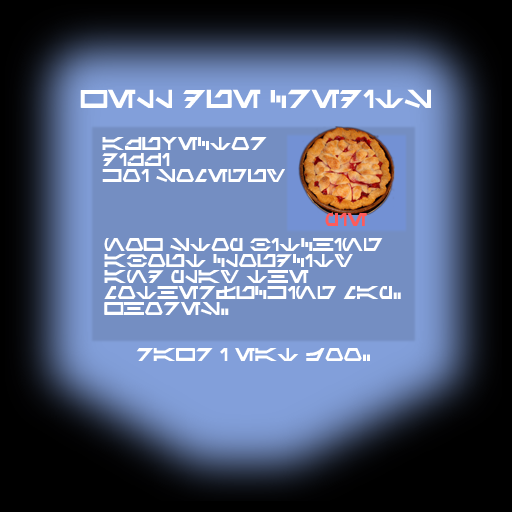
<style>
.page{position:relative;width:512px;height:512px}
.page>*{position:absolute;margin:0}
.t1{font:18.7px "Aurek-Besh";color:#ffffff}
.t2{font:13.3px "Aurek-Besh";color:#ffffff}
.t3{font:13.3px "Aurek-Besh";color:#ff5b5b}
</style>
<div class="page">
<p class="t1" style="left:80px;top:89px;width:351px;height:19px">WELL DUE CREDITS</p>
<p class="t2" style="left:102px;top:137px;width:183px;height:45px">azuvector <br>DIZZI<br>KOI Someguy</p>
<p class="t3" style="left:325px;top:213px;width:42px;height:13px">pie</p>
<p class="t2" style="left:104px;top:238px;width:297px;height:77px">now stop bitching<br>about cloudcity<br>and play the <br>motherfucking map.<br>whores.</p>
<p class="t2" style="left:136px;top:348px;width:234px;height:13px">rawr I eat joo.</p>
</div>
